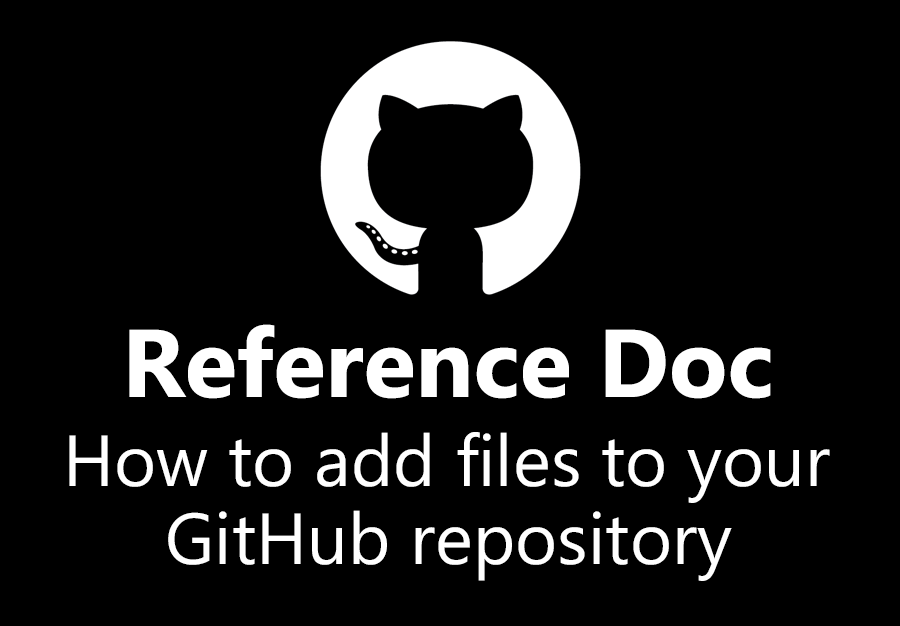
<style>
.page{position:relative;width:900px;height:626px;background:#000000}
.page>*{position:absolute;margin:0}
.t1{font:96px "MicrosoftPhagsPa-Bold";color:#ffffff}
.t2{font:72px "MicrosoftPhagsPa";color:#ffffff}
</style>
<div class="page">
<p class="t1" style="left:129px;top:324px;width:642px;height:75px">Reference Doc</p>
<p class="t2" style="left:69px;top:432px;width:761px;height:71px">How to add files to your</p>
<p class="t2" style="left:168px;top:510px;width:564px;height:71px">GitHub repository</p>
</div>
